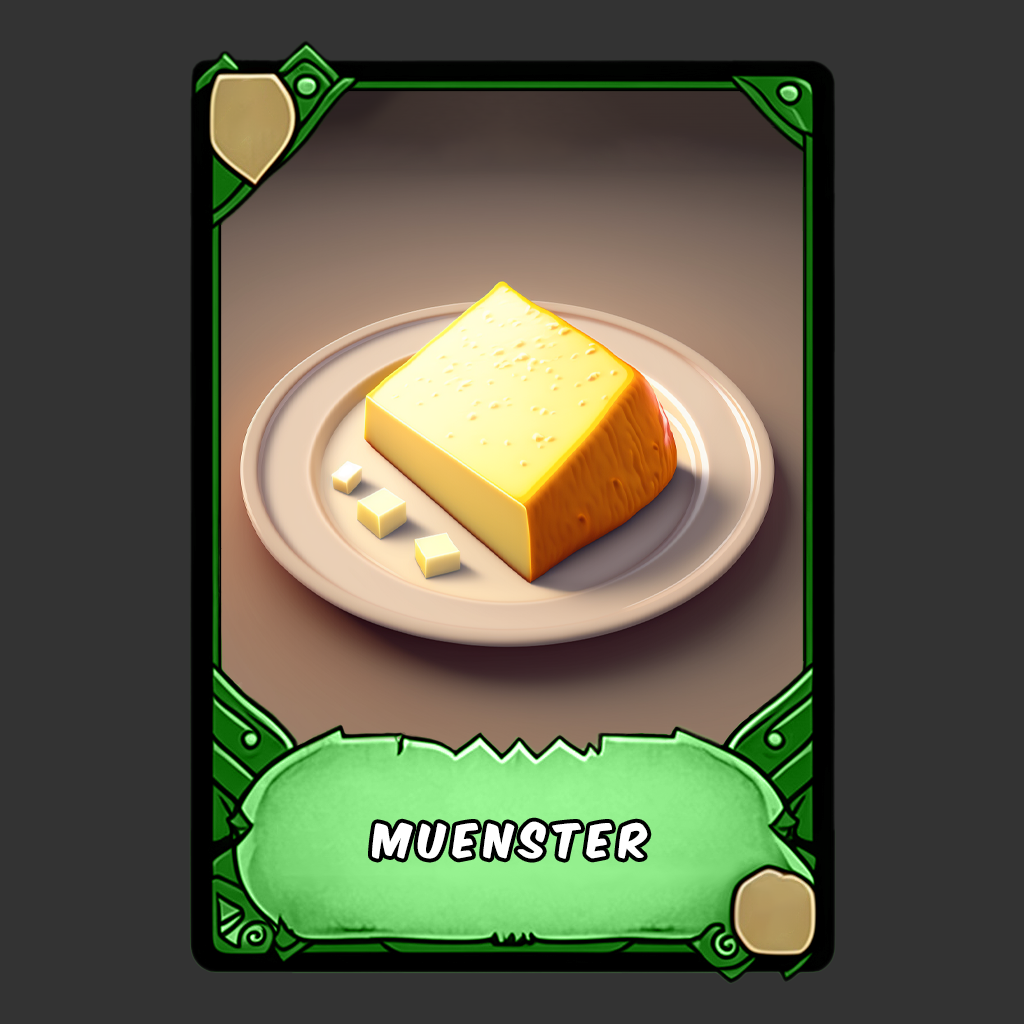
<style>
.page{position:relative;width:1024px;height:1024px;background:#333333}
.page>*{position:absolute;margin:0}
.t1{font:40px "KomikaAxis";letter-spacing:0.2em;color:#ffffff}
</style>
<div class="page">
<p class="t1" style="left:372px;top:821px;width:276px;height:38px">muenster</p>
</div>
